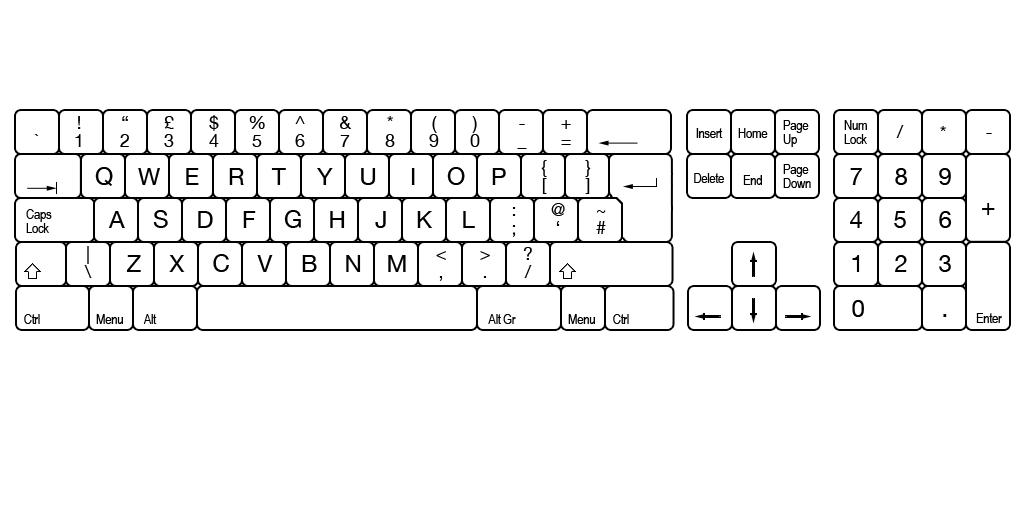
<style>
.page{position:relative;width:1024px;height:512px;background:#ffffff}
.page>*{position:absolute;margin:0}
.t1{font:17.6px/17.6px "HelveticaNeue";letter-spacing:-0.04em;color:#000000}
.t2{font:14.4px/14.4px "ArialNarrow";letter-spacing:-0.04em;color:#000000}
.t3{font:17.6px "HelveticaNeue";letter-spacing:-0.04em;color:#000000}
.t4{font:17.6px "HelveticaNeue";letter-spacing:-0.04em}
.t5{font:14.4px "ArialNarrow";letter-spacing:-0.04em;color:#000000}
.t6{font:24px "HelveticaNeue";letter-spacing:-0.04em;color:#000000}
</style>
<div class="page">
<p class="t1" style="left:75px;top:116px;width:6px;height:31px;text-align:center">!<br>1</p>
<p class="t1" style="left:120px;top:116px;width:9px;height:31px;text-align:center">“<br>2</p>
<p class="t1" style="left:164px;top:116px;width:10px;height:31px;text-align:center">£<br>3</p>
<p class="t1" style="left:209px;top:115px;width:10px;height:32px;text-align:center">$<br>4</p>
<p class="t1" style="left:249px;top:116px;width:16px;height:31px;text-align:center">%<br>5</p>
<p class="t1" style="left:295px;top:116px;width:10px;height:31px;text-align:center">^<br>6</p>
<p class="t1" style="left:340px;top:116px;width:12px;height:31px;text-align:center">&amp;<br>7</p>
<p class="t1" style="left:385px;top:116px;width:10px;height:31px;text-align:center">*<br>8</p>
<p class="t1" style="left:429px;top:116px;width:10px;height:31px;text-align:center">(<br>9</p>
<p class="t1" style="left:470px;top:116px;width:10px;height:31px;text-align:center">)<br>0</p>
<p class="t1" style="left:517px;top:124px;width:10px;height:25px;text-align:center">-<br>_</p>
<p class="t1" style="left:561px;top:120px;width:10px;height:25px;text-align:center">+<br>=</p>
<p class="t2" style="left:783px;top:120px;width:26px;height:27px">Page<br>Up</p>
<p class="t2" style="left:844px;top:120px;width:23px;height:24px">Num<br>Lock</p>
<p class="t3" style="left:896px;top:125px;width:8px;height:13px">/</p>
<p class="t3" style="left:940px;top:126px;width:6px;height:5px">*</p>
<p class="t4" style="left:34px;top:134px;width:5px;height:2px">`</p>
<p class="t5" style="left:696px;top:128px;width:27px;height:10px">Insert</p>
<p class="t5" style="left:738px;top:128px;width:30px;height:10px">Home</p>
<p class="t3" style="left:986px;top:133px;width:6px;height:1px">-</p>
<p class="t1" style="left:541px;top:160px;width:6px;height:34px;text-align:center">{<br>[</p>
<p class="t1" style="left:585px;top:160px;width:6px;height:34px;text-align:center">}<br>]</p>
<p class="t6" style="left:95px;top:167px;width:18px;height:19px">Q</p>
<p class="t6" style="left:138px;top:168px;width:22px;height:17px">W</p>
<p class="t6" style="left:186px;top:168px;width:13px;height:17px">E</p>
<p class="t6" style="left:229px;top:168px;width:15px;height:17px">R</p>
<p class="t6" style="left:271px;top:168px;width:15px;height:17px">T</p>
<p class="t6" style="left:317px;top:168px;width:16px;height:17px">Y</p>
<p class="t6" style="left:361px;top:168px;width:15px;height:17px">U</p>
<p class="t6" style="left:411px;top:168px;width:4px;height:17px">I</p>
<p class="t6" style="left:447px;top:167px;width:18px;height:18px">O</p>
<p class="t6" style="left:492px;top:168px;width:14px;height:17px">P</p>
<p class="t5" style="left:694px;top:173px;width:30px;height:10px">Delete</p>
<p class="t2" style="left:783px;top:164px;width:28px;height:24px">Page<br>Down</p>
<p class="t6" style="left:850px;top:168px;width:12px;height:17px">7</p>
<p class="t6" style="left:895px;top:168px;width:12px;height:17px">8</p>
<p class="t6" style="left:939px;top:168px;width:12px;height:17px">9</p>
<p class="t5" style="left:743px;top:175px;width:19px;height:10px">End</p>
<p class="t2" style="left:26px;top:209px;width:26px;height:24px">Caps<br>Lock</p>
<p class="t1" style="left:512px;top:207px;width:4px;height:30px;text-align:center">:<br>;</p>
<p class="t1" style="left:551px;top:203px;width:14px;height:23px;text-align:center">@<br>‘</p>
<p class="t6" style="left:982px;top:203px;width:13px;height:12px">+</p>
<p class="t6" style="left:108px;top:211px;width:17px;height:17px">A</p>
<p class="t6" style="left:153px;top:210px;width:15px;height:18px">S</p>
<p class="t6" style="left:198px;top:211px;width:15px;height:17px">D</p>
<p class="t6" style="left:243px;top:211px;width:13px;height:17px">F</p>
<p class="t6" style="left:284px;top:210px;width:17px;height:18px">G</p>
<p class="t6" style="left:330px;top:211px;width:15px;height:17px">H</p>
<p class="t6" style="left:375px;top:211px;width:11px;height:17px">J</p>
<p class="t6" style="left:417px;top:211px;width:16px;height:17px">K</p>
<p class="t6" style="left:463px;top:211px;width:12px;height:17px">L</p>
<p class="t1" style="left:596px;top:210px;width:10px;height:24px;text-align:center">~<br>#</p>
<p class="t6" style="left:850px;top:211px;width:12px;height:17px">4</p>
<p class="t6" style="left:894px;top:211px;width:12px;height:17px">5</p>
<p class="t6" style="left:939px;top:211px;width:13px;height:17px">6</p>
<p class="t1" style="left:84px;top:246px;width:8px;height:32px;text-align:center">|<br>\</p>
<p class="t6" style="left:126px;top:255px;width:15px;height:17px">Z</p>
<p class="t6" style="left:169px;top:255px;width:16px;height:17px">X</p>
<p class="t6" style="left:213px;top:254px;width:16px;height:18px">C</p>
<p class="t6" style="left:257px;top:255px;width:16px;height:17px">V</p>
<p class="t6" style="left:302px;top:255px;width:15px;height:17px">B</p>
<p class="t6" style="left:346px;top:255px;width:15px;height:17px">N</p>
<p class="t6" style="left:388px;top:255px;width:18px;height:17px">M</p>
<p class="t1" style="left:436px;top:251px;width:10px;height:30px;text-align:center">&lt;<br>,</p>
<p class="t1" style="left:480px;top:251px;width:10px;height:27px;text-align:center">&gt;<br>.</p>
<p class="t1" style="left:523px;top:247px;width:9px;height:31px;text-align:center">?<br>/</p>
<p class="t6" style="left:852px;top:255px;width:8px;height:17px">1</p>
<p class="t6" style="left:895px;top:255px;width:12px;height:17px">2</p>
<p class="t6" style="left:939px;top:255px;width:12px;height:17px">3</p>
<p class="t6" style="left:852px;top:300px;width:12px;height:17px">0</p>
<p class="t5" style="left:24px;top:314px;width:16px;height:10px">Ctrl</p>
<p class="t5" style="left:96px;top:314px;width:27px;height:10px">Menu</p>
<p class="t5" style="left:143px;top:314px;width:14px;height:10px">Alt</p>
<p class="t5" style="left:488px;top:314px;width:28px;height:10px">Alt Gr</p>
<p class="t5" style="left:568px;top:314px;width:27px;height:10px">Menu</p>
<p class="t5" style="left:613px;top:314px;width:16px;height:10px">Ctrl</p>
<p class="t6" style="left:943px;top:314px;width:4px;height:3px">.</p>
<p class="t5" style="left:976px;top:313px;width:26px;height:10px">Enter</p>
</div>
